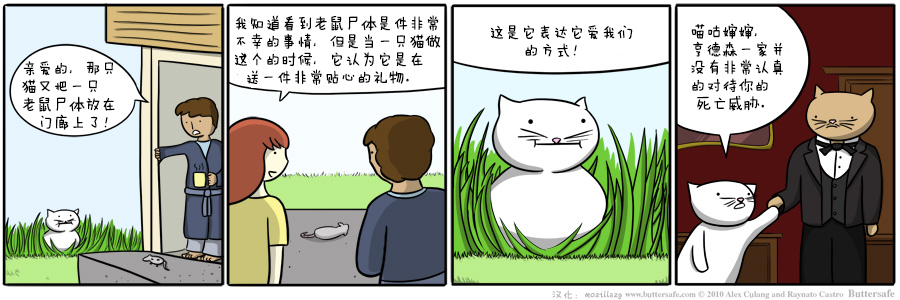
<style>
.page{position:relative;width:900px;height:300px;background:#ffffff}
.page>*{position:absolute;margin:0}
.t1{font:16px/18px "FZMWJW--GB1-0";color:#000000}
.t2{font:11px "FZMWJW--GB1-0";color:#b5b5b5}
</style>
<div class="page">
<p class="t1" style="left:235px;top:15px;width:206px;height:70px">我知道看到老鼠尸体是件非常<br>不幸的事情，但是当一只猫做<br>这个的时候，它认为它是在<br>  送一件非常贴心的礼物。</p>
<p class="t1" style="left:491px;top:25px;width:142px;height:32px">这是它表达它爱我们<br>      的方式！</p>
<p class="t1" style="left:691px;top:23px;width:92px;height:88px">喵咕婶婶，<br>亨德森一家并<br>没有非常认真<br>的对待你的<br> 死亡威胁。</p>
<p class="t1" style="left:22px;top:61px;width:93px;height:69px">亲爱的，那只<br>猫又把一只<br>老鼠尸体放在<br>   门廊上了！</p>
<p class="t2" style="left:552px;top:290px;width:70px;height:10px">汉化：mozillazg</p>
</div>
